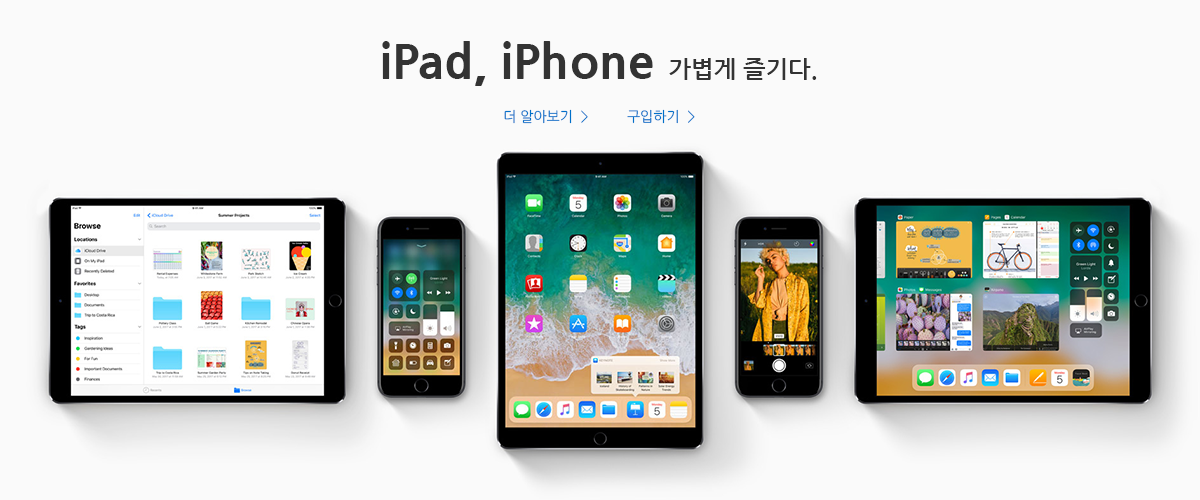
<style>
.page{position:relative;width:1200px;height:500px;background:#fafafa}
.page>*{position:absolute;margin:0}
.t1{font:48px "NanumGothicExtraBold";color:#333333}
.t2{font:24px "NanumGothicBold";color:#333333}
.t3{font:14px "NanumGothic";color:#0070c9}
</style>
<div class="page">
<p class="t1" style="left:382px;top:41px;width:435px;height:45px">iPad, iPhone <span class="t2">가볍게 즐기다.</span></p>
<p class="t3" style="left:504px;top:109px;width:191px;height:15px">더 알아보기  &gt;     구입하기  &gt;</p>
</div>
